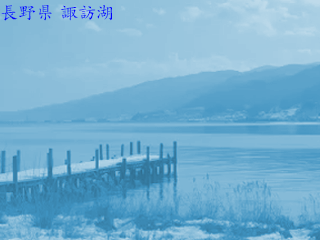
<style>
.page{position:relative;width:320px;height:240px}
.page>*{position:absolute;margin:0}
.t1{font:18px "DFKaiSho-Md-MP-RKSJ-H";color:#0000ff}
</style>
<div class="page">
<p class="t1" style="left:1px;top:5px;width:111px;height:16px">長野県 諏訪湖</p>
</div>
